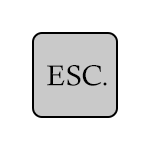
<style>
.page{position:relative;width:150px;height:150px;background:#ffffff}
.page>*{position:absolute;margin:0}
.t1{font:28.3px "CalistoMT";color:#000000;text-transform:uppercase}
</style>
<div class="page">
<p class="t1" style="left:47px;top:65px;width:60px;height:21px">ESC.</p>
</div>
